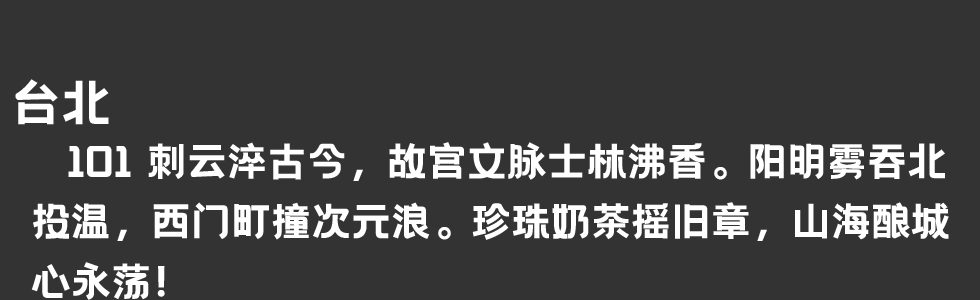
<style>
.page{position:relative;width:980px;height:300px;background:#333333}
.page>*{position:absolute;margin:0}
.t1{font:50px "HelloFont-WenYiHei";color:#ffffff}
.t2{font:40px/60px "HelloFont-WenYiHei";color:#ffffff}
</style>
<div class="page">
<p class="t1" style="left:15px;top:79px;width:94px;height:46px">台北</p>
<p class="t2" style="left:31px;top:142px;width:918px;height:158px">101 刺云淬古今，故宫文脉士林沸香。阳明雾吞北<br>投温，西门町撞次元浪。珍珠奶茶摇旧章，山海酿城<br>心永荡！</p>
</div>
